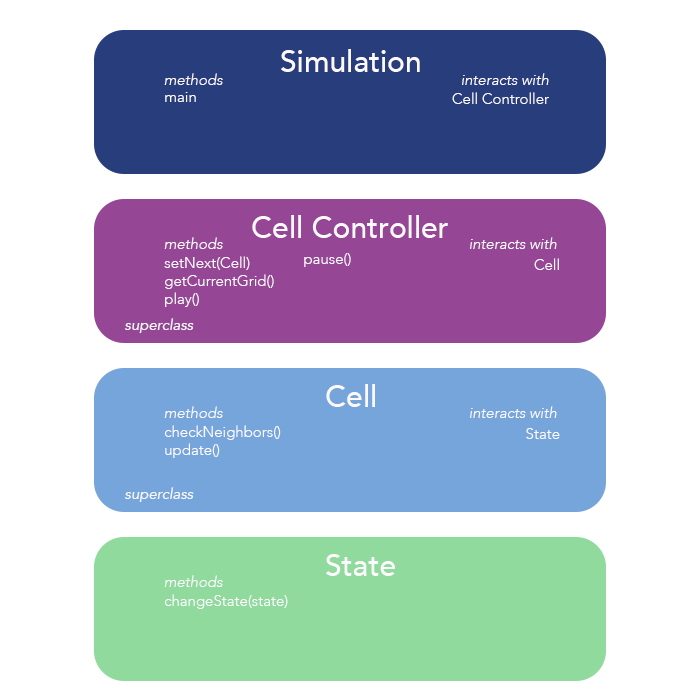
<style>
.page{position:relative;width:700px;height:700px;background:#ffffff}
.page>*{position:absolute;margin:0}
.t1{font:30px "Avenir-Medium";color:#fdfafd}
.t2{font:15px "Avenir-LightOblique";color:#fdfafd}
.t3{font:15px "Avenir-Light";color:#fdfafd}
.t4{font:15px "Avenir-Oblique";color:#f6f6f9}
</style>
<div class="page">
<p class="t1" style="left:281px;top:49px;width:139px;height:23px">Simulation</p>
<p class="t2" style="left:164px;top:73px;width:59px;height:12px">methods</p>
<p class="t2" style="left:462px;top:73px;width:87px;height:12px">interacts with</p>
<p class="t3" style="left:165px;top:92px;width:31px;height:10px">main</p>
<p class="t3" style="left:452px;top:92px;width:97px;height:12px">Cell Controller</p>
<p class="t1" style="left:252px;top:215px;width:196px;height:23px">Cell Controller</p>
<p class="t2" style="left:164px;top:237px;width:59px;height:12px">methods</p>
<p class="t2" style="left:470px;top:237px;width:87px;height:12px">interacts with</p>
<p class="t3" style="left:164px;top:256px;width:110px;height:51px">setNext(Cell)<br>getCurrentGrid()<br>play()</p>
<p class="t3" style="left:304px;top:253px;width:47px;height:14px">pause()</p>
<p class="t3" style="left:534px;top:258px;width:25px;height:12px">Cell</p>
<p class="t4" style="left:124px;top:318px;width:70px;height:15px">superclass</p>
<p class="t1" style="left:326px;top:384px;width:49px;height:23px">Cell</p>
<p class="t2" style="left:164px;top:406px;width:59px;height:12px">methods</p>
<p class="t2" style="left:470px;top:406px;width:87px;height:12px">interacts with</p>
<p class="t3" style="left:164px;top:425px;width:117px;height:33px">checkNeighbors()<br>update()</p>
<p class="t3" style="left:526px;top:428px;width:34px;height:11px">State</p>
<p class="t4" style="left:124px;top:487px;width:70px;height:15px">superclass</p>
<p class="t1" style="left:326px;top:554px;width:69px;height:22px">State</p>
<p class="t2" style="left:164px;top:575px;width:59px;height:12px">methods</p>
<p class="t3" style="left:164px;top:594px;width:124px;height:15px">changeState(state)</p>
</div>
